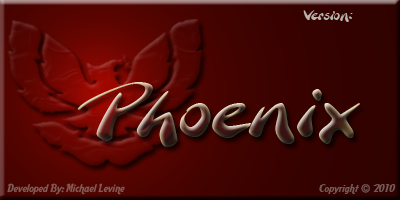
<style>
.page{position:relative;width:400px;height:200px}
.page>*{position:absolute;margin:0}
.t1{font:13.9px "BranchingMouse-Becker";color:#b7b4ab;scale:1.19 1}
.t2{font:68.4px "BranchingMouse-Becker";scale:1.28 1}
.t3{font:11px "AardvarkCafe";color:#825a54}
.t4{font:11px "AardvarkCafe";color:#735954}
</style>
<div class="page">
<p class="t1" style="left:303px;top:10px;width:50px;height:12px">Version:</p>
<p class="t2" style="left:77px;top:82px;width:283px;height:65px">Phoenix</p>
<p class="t3" style="left:7px;top:183px;width:118px;height:12px">Developed By: Michael Levine</p>
<p class="t4" style="left:319px;top:184px;width:77px;height:10px">Copyright      2010</p>
</div>
